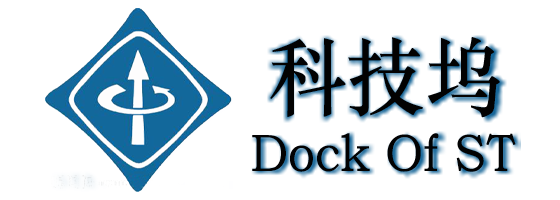
<style>
.page{position:relative;width:560px;height:200px;background:#ffffff}
.page>*{position:absolute;margin:0}
.t1{font:85.9px "STZhongsong";color:#020202;scale:0.91 1}
.t2{font:52.8px "STZhongsong";color:#020202;scale:0.91 1}
</style>
<div class="page">
<p class="t1" style="left:270px;top:37px;width:230px;height:81px">科技坞</p>
<p class="t2" style="left:252px;top:133px;width:264px;height:39px">Dock Of ST</p>
</div>
